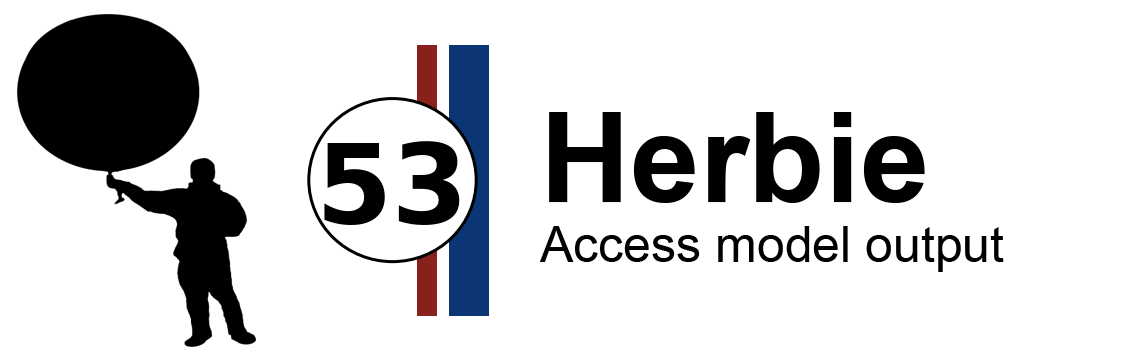
<style>
.page{position:relative;width:1136px;height:360px;background:#ffffff}
.page>*{position:absolute;margin:0}
.t1{font:50px "ArialMT";color:#000000}
.t2{font:125px "Arial-BoldMT";color:#000000}
</style>
<div class="page">
<p class="t1" style="left:540px;top:112px;width:464px;height:160px"><span class="t2">Herbie<br></span>Access model output</p>
</div>
